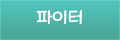
<style>
.page{position:relative;width:120px;height:40px}
.page>*{position:absolute;margin:0}
.t1{font:17.8px "MaplestoryLight";color:#ffffff}
</style>
<div class="page">
<p class="t1" style="left:36px;top:10px;width:46px;height:15px">파이터</p>
</div>
